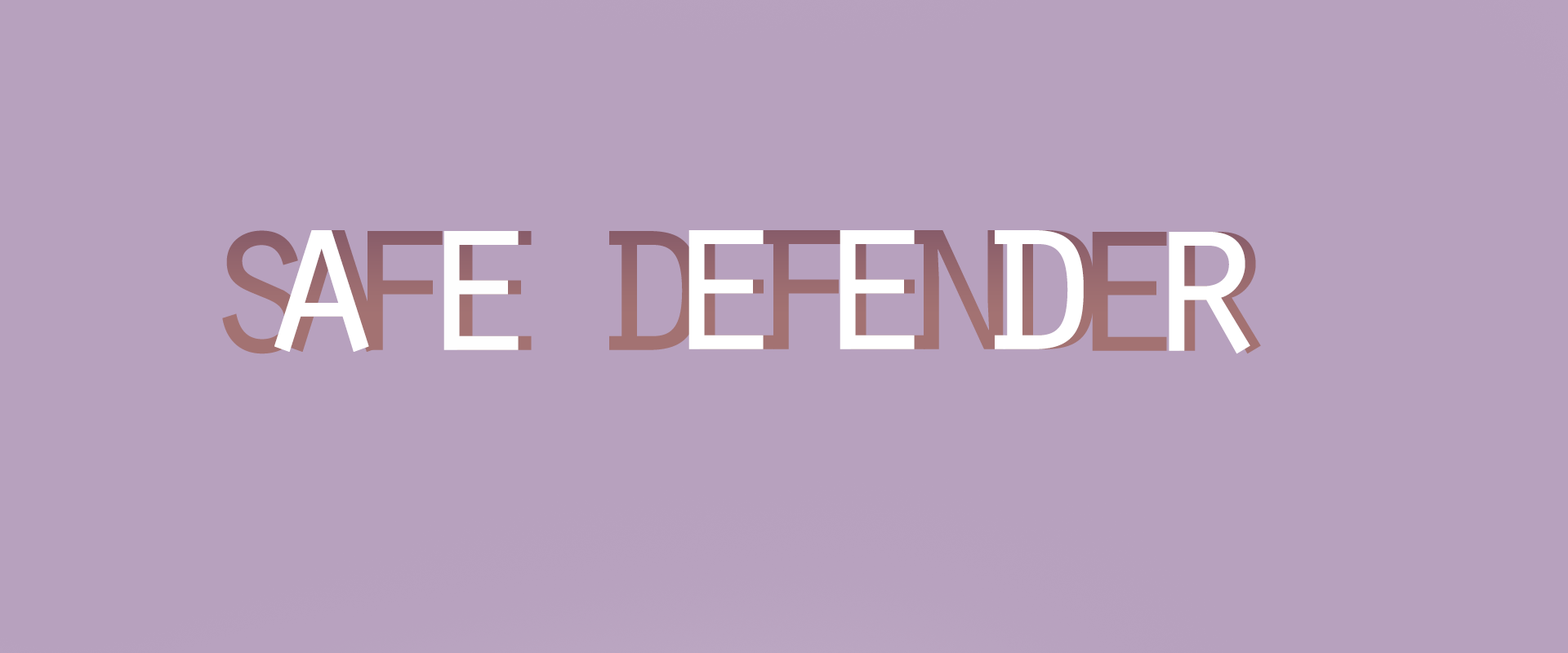
<style>
.page{position:relative;width:1568px;height:653px;background:#b7a1be}
.page>*{position:absolute;margin:0}
.t1{font:227.9px "OratorStd";letter-spacing:-0.15em;color:#9e6e70}
.t2{font:227.9px "OratorStd";letter-spacing:-0.15em;color:#ffffff}
.t3{font:227.9px "OratorStd";letter-spacing:-0.15em;color:#ff0101}
.t4{font:227.9px "OratorStd";letter-spacing:-0.15em;color:#9b6b6f}
.t5{font:227.9px "OratorStd";letter-spacing:-0.15em;color:#fefefe}
.t6{font:227.9px "OratorStd";letter-spacing:-0.15em}
.t7{font:227.9px "OratorStd";letter-spacing:-0.15em;color:#9d6d70}
</style>
<div class="page">
<p class="t1" style="left:222px;top:230px;width:78px;height:124px">s</p>
<p class="t2" style="left:274px;top:230px;width:95px;height:122px"><span class="t3"><br></span>a</p>
<p class="t4" style="left:368px;top:231px;width:75px;height:119px">f</p>
<p class="t5" style="left:443px;top:231px;width:76px;height:119px">e</p>
<p class="t6" style="left:457px;top:231px;width:75px;height:119px">e</p>
<p class="t6" style="left:609px;top:231px;width:89px;height:119px">d</p>
<p class="t2" style="left:688px;top:230px;width:76px;height:120px">e</p>
<p class="t6" style="left:699px;top:230px;width:75px;height:120px">e</p>
<p class="t4" style="left:773px;top:230px;width:76px;height:120px">f</p>
<p class="t2" style="left:840px;top:230px;width:75px;height:120px">e</p>
<p class="t6" style="left:850px;top:230px;width:75px;height:120px">e</p>
<p class="t1" style="left:924px;top:230px;width:80px;height:120px">n</p>
<p class="t2" style="left:995px;top:230px;width:89px;height:120px">d</p>
<p class="t7" style="left:1092px;top:232px;width:75px;height:119px">e</p>
<p class="t2" style="left:1169px;top:232px;width:81px;height:122px">r</p>
</div>
